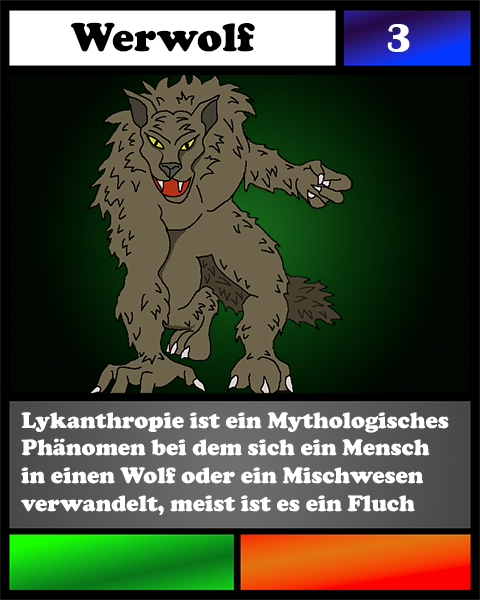
<style>
.page{position:relative;width:480px;height:600px}
.page>*{position:absolute;margin:0}
.t1{font:41.7px "CooperBlack";color:#000000}
.t2{font:41.7px "BritannicBold";color:#ffffff}
.t3{font:23.1px "CooperBlack";color:#ffffff}
</style>
<div class="page">
<p class="t1" style="left:71px;top:22px;width:184px;height:30px">Werwolf</p>
<p class="t2" style="left:387px;top:24px;width:23px;height:28px">3</p>
<p class="t3" style="left:21px;top:412px;width:428px;height:103px">Lykanthropie ist ein Mythologisches<br>Phänomen bei dem sich ein Mensch<br>in einen Wolf oder ein Mischwesen<br>verwandelt, meist ist es ein Fluch</p>
</div>
